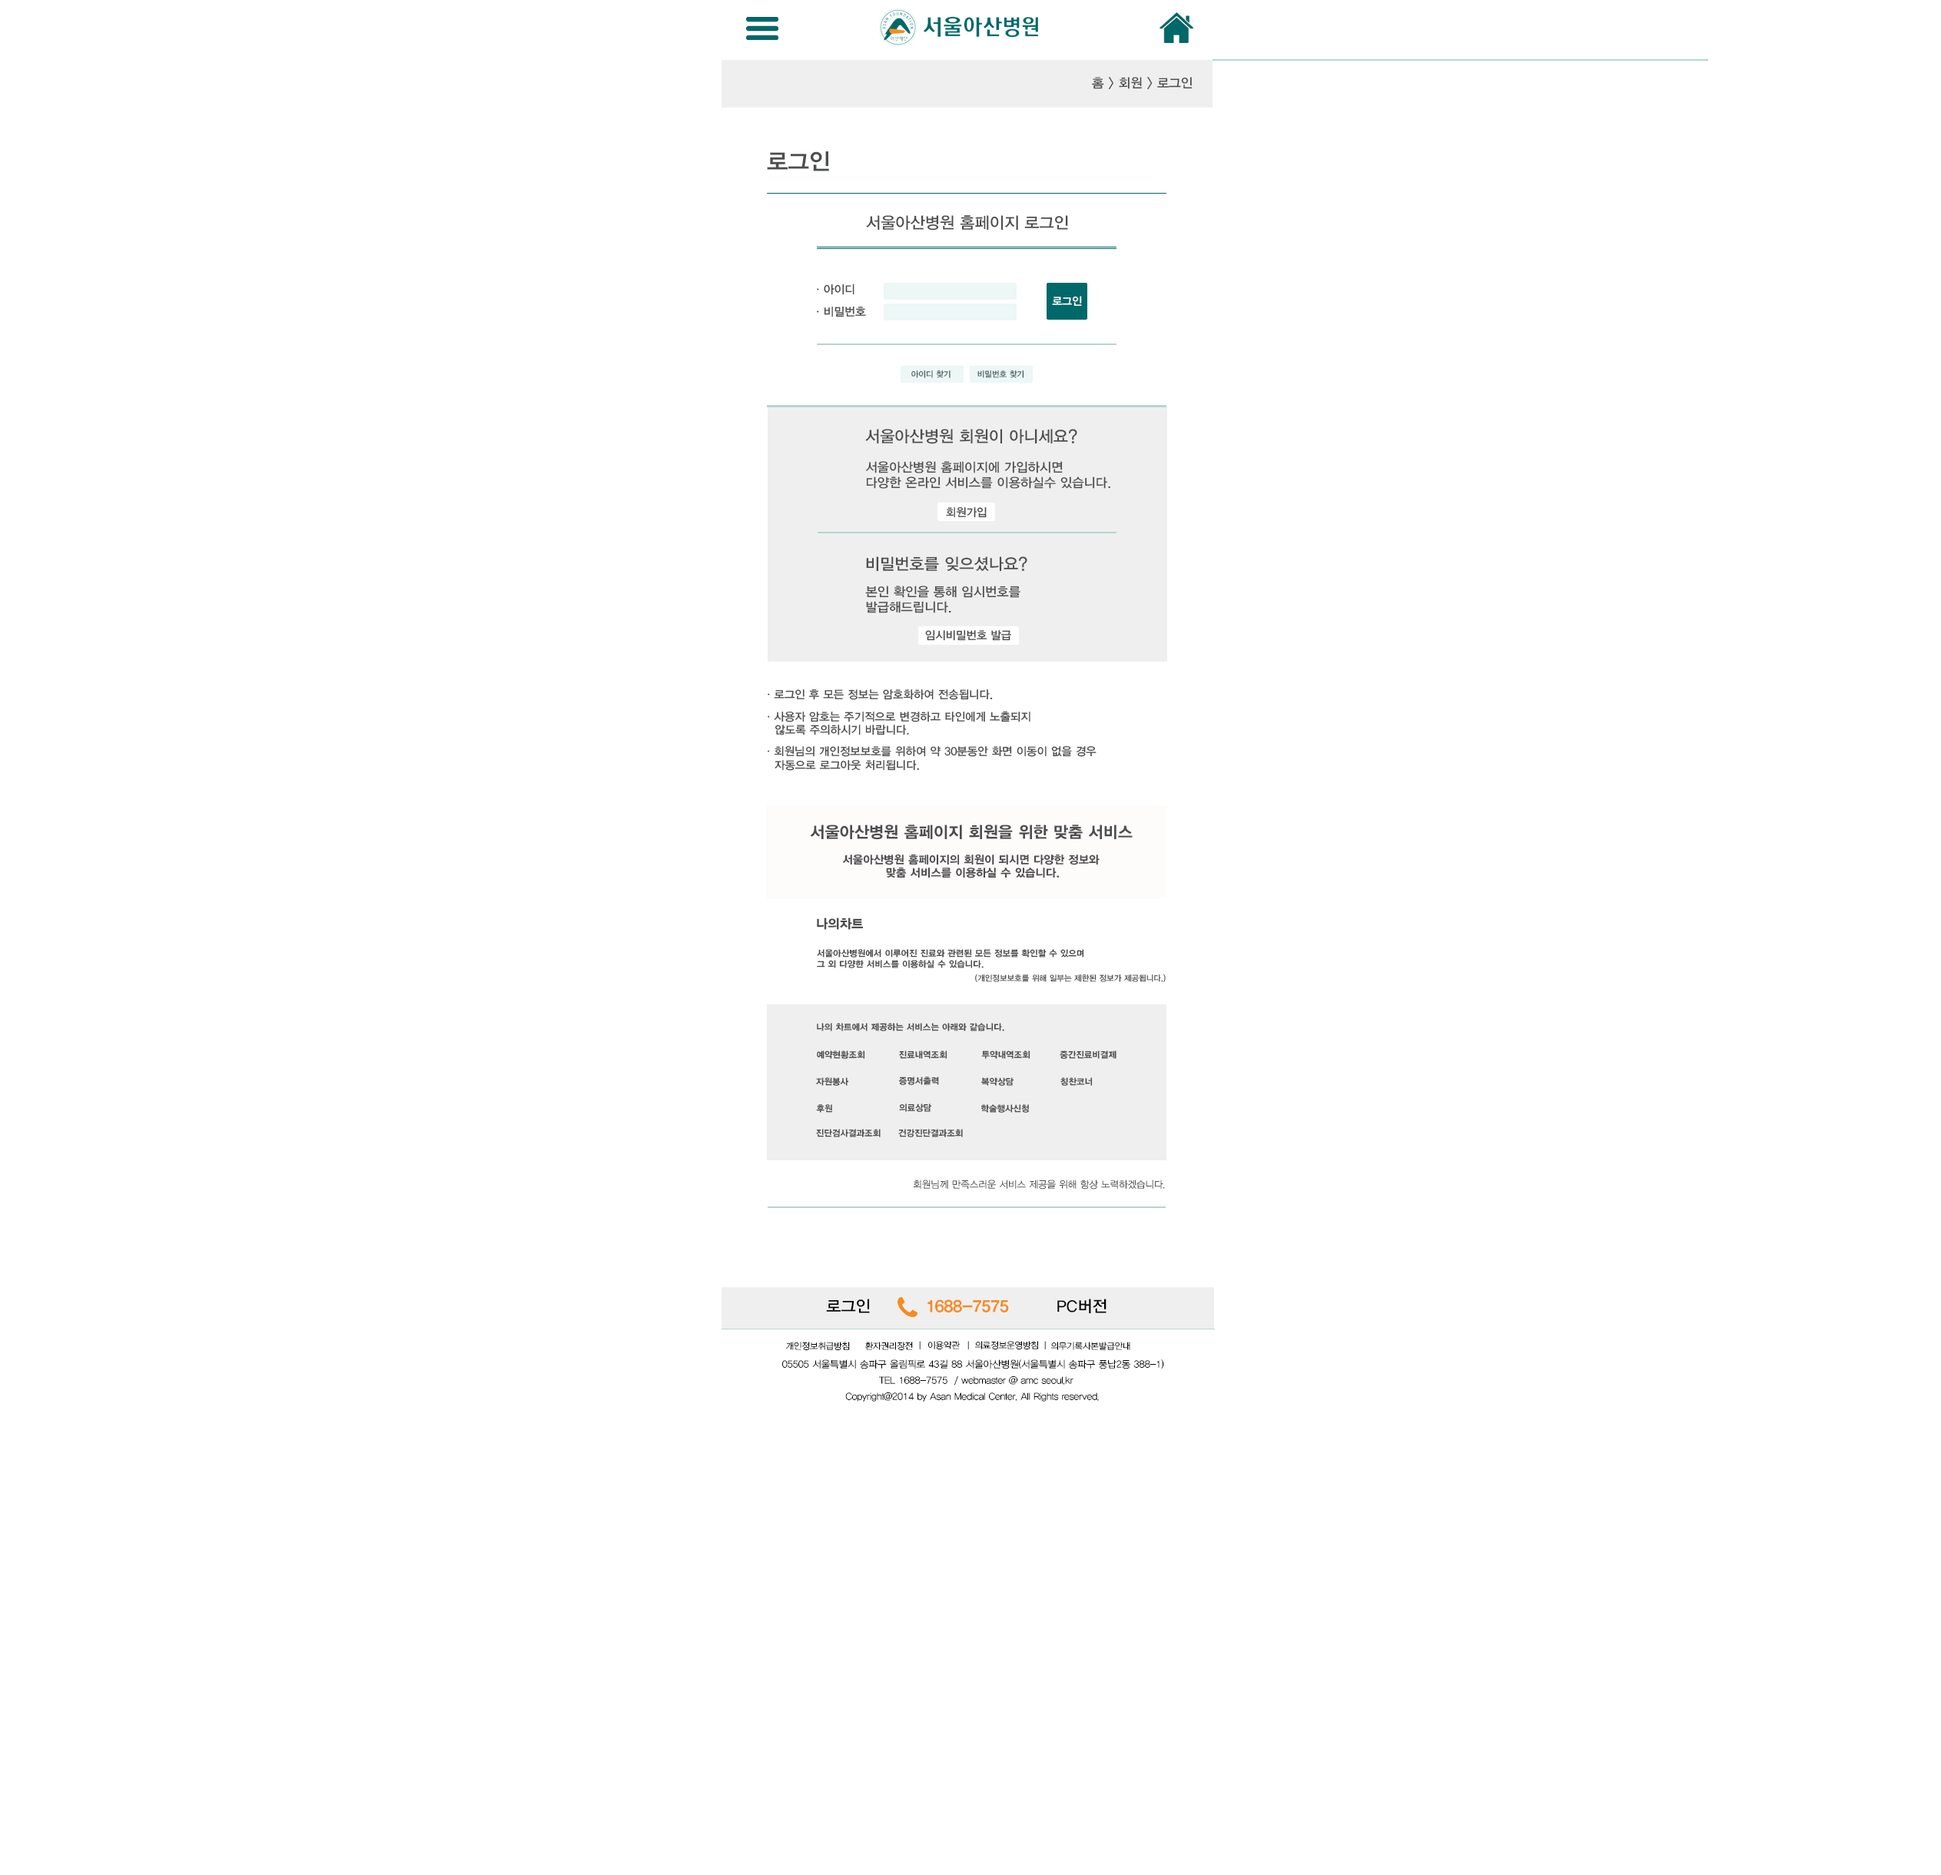
<style>
.page{position:relative;width:1941px;height:1875px;background:#ffffff}
.page>*{position:absolute;margin:0}
.t1{font:12.9px "YDIYGO330";color:#4c4d4f}
.t2{font:22.9px "YDIYGO340";color:#4c4d4f}
.t3{font:16px "YDIYGO330";color:#4c4d4f}
.t4{font:11.5px "YDIYGO330";color:#4c4d4f}
.t5{font:10.7px "YDIYGO330";color:#ffffff}
.t6{font:8px "YDIYGO330";color:#556363}
.t7{font:12.8px "YDIYGO330";color:#4c4d4f}
.t8{font:11.2px "YDIYGO330";color:#4c4d4f}
.t9{font:16px "YDIYGO350";color:#4c4d4f}
.t10{font:11.2px "YDIYGO350";color:#4c4d4f}
.t11{font:12.8px "YDIYGO360";color:#4c4d4f}
.t12{font:8.8px "YDIYGO350";color:#4c4d4f}
.t13{font:8px "YDIYGO330";color:#4c4d4f}
.t14{font:9.6px "YDIYGO310";color:#4c4d4f}
.t15{font:16px "YDIYGO330";color:#000000}
.t16{font:16px "YDIYGO350";color:#f68b1f}
.t17{font:8.7px "YDIYGO310";color:#000000}
.t18{font:8.7px "YDIYGO310"}
.t19{font:9.6px/16px "YDIYGO310";color:#000000}
.t20{font:9.6px "YDIYGO310";color:#000000}
</style>
<div class="page">
<p class="t1" style="left:1092px;top:77px;width:100px;height:13px">홈 &gt; 회원 &gt; 로그인</p>
<p class="t2" style="left:767px;top:151px;width:62px;height:20px">로그인</p>
<p class="t3" style="left:866px;top:215px;width:202px;height:15px">서울아산병원 홈페이지 로그인</p>
<p class="t4" style="left:817px;top:284px;width:37px;height:11px">ㆍ아이디</p>
<p class="t4" style="left:817px;top:306px;width:49px;height:11px">ㆍ비밀번호</p>
<p class="t5" style="left:1052px;top:296px;width:30px;height:10px">로그인</p>
<p class="t6" style="left:911px;top:370px;width:39px;height:8px">아이디 찾기</p>
<p class="t6" style="left:977px;top:370px;width:47px;height:8px">비밀번호 찾기</p>
<p class="t3" style="left:865px;top:429px;width:212px;height:15px">서울아산병원 회원이 아니세요?</p>
<p class="t7" style="left:865px;top:461px;width:245px;height:28px">서울아산병원 홈페이지에 가입하시면<br>다양한 온라인 서비스를 이용하실수 있습니다.</p>
<p class="t8" style="left:946px;top:506px;width:40px;height:12px">회원가입</p>
<p class="t3" style="left:866px;top:556px;width:161px;height:16px">비밀번호를 잊으셨나요?</p>
<p class="t7" style="left:865px;top:585px;width:155px;height:28px">본인 확인을 통해 임시번호를<br>발급해드립니다.</p>
<p class="t8" style="left:925px;top:630px;width:86px;height:11px">임시비밀번호 발급</p>
<p class="t8" style="left:768px;top:689px;width:225px;height:11px">ㆍ로그인 후 모든 정보는 암호화하여 전송됩니다.</p>
<p class="t8" style="left:768px;top:711px;width:262px;height:24px">ㆍ사용자 암호는 주기적으로 변경하고 타인에게 노출되지<br>   않도록 주의하시기 바랍니다.</p>
<p class="t8" style="left:767px;top:745px;width:329px;height:26px">ㆍ회원님의 개인정보보호를 위하여 약 30분동안 화면 이동이 없을 경우 <br>   자동으로 로그아웃 처리됩니다.</p>
<p class="t9" style="left:810px;top:824px;width:322px;height:16px">서울아산병원 홈페이지 회원을 위한 맞춤 서비스</p>
<p class="t10" style="left:842px;top:854px;width:257px;height:24px;text-align:center">서울아산병원 홈페이지의 회원이 되시면 다양한 정보와 <br>맞춤 서비스를 이용하실 수 있습니다.</p>
<p class="t11" style="left:817px;top:917px;width:46px;height:13px">나의차트</p>
<p class="t12" style="left:817px;top:949px;width:267px;height:19px">서울아산병원에서 이루어진 진료와 관련된 모든 정보를 확인할 수 있으며 <br>그 외 다양한 서비스를 이용하실 수 있습니다.</p>
<p class="t13" style="left:975px;top:973px;width:191px;height:10px">(개인정보보호를 위해 일부는 제한된 정보가 제공됩니다.)</p>
<p class="t12" style="left:817px;top:1023px;width:187px;height:8px">나의 차트에서 제공하는 서비스는 아래와 같습니다.</p>
<p class="t12" style="left:817px;top:1050px;width:48px;height:9px">예약현황조회</p>
<p class="t12" style="left:899px;top:1050px;width:48px;height:9px">진료내역조회</p>
<p class="t12" style="left:981px;top:1050px;width:49px;height:9px">투약내역조회</p>
<p class="t12" style="left:1059px;top:1050px;width:57px;height:9px">중간진료비결제</p>
<p class="t12" style="left:816px;top:1077px;width:33px;height:9px">자원봉사</p>
<p class="t12" style="left:898px;top:1076px;width:41px;height:9px">증명서출력</p>
<p class="t12" style="left:981px;top:1077px;width:33px;height:9px">복약상담</p>
<p class="t12" style="left:1060px;top:1077px;width:33px;height:9px">칭찬코너</p>
<p class="t12" style="left:816px;top:1104px;width:17px;height:8px">후원</p>
<p class="t12" style="left:899px;top:1103px;width:33px;height:9px">의료상담</p>
<p class="t12" style="left:980px;top:1104px;width:49px;height:8px">학술행사신청</p>
<p class="t12" style="left:816px;top:1129px;width:64px;height:8px">진단검사결과조회</p>
<p class="t12" style="left:898px;top:1129px;width:65px;height:8px">건강진단결과조회</p>
<p class="t14" style="left:913px;top:1179px;width:252px;height:10px">회원님께 만족스러운 서비스 제공을 위해 항상 노력하겠습니다.</p>
<p class="t15" style="left:826px;top:1298px;width:44px;height:15px">로그인</p>
<p class="t16" style="left:927px;top:1299px;width:82px;height:13px">1688-7575</p>
<p class="t15" style="left:1057px;top:1298px;width:49px;height:16px">PC버전</p>
<p class="t17" style="left:786px;top:1341px;width:64px;height:9px">개인정보취급방침</p>
<p class="t17" style="left:864px;top:1341px;width:49px;height:9px">환자권리장전</p>
<p class="t18" style="left:919px;top:1341px;width:1px;height:8px">|</p>
<p class="t17" style="left:928px;top:1341px;width:32px;height:8px">이용약관</p>
<p class="t18" style="left:967px;top:1341px;width:2px;height:8px">|</p>
<p class="t17" style="left:975px;top:1341px;width:63px;height:8px">의료정보운영방침</p>
<p class="t18" style="left:1044px;top:1341px;width:2px;height:8px">|</p>
<p class="t17" style="left:1050px;top:1341px;width:80px;height:9px">의무기록사본발급안내</p>
<p class="t19" style="left:782px;top:1359px;width:382px;height:26px;text-align:center">05505 서울특별시 송파구 올림픽로 43길 88 서울아산병원(서울특별시 송파구 풍납2동 388-1)  <br>TEL 1688-7575  / webmaster @ amc seoul.kr</p>
<p class="t20" style="left:845px;top:1392px;width:254px;height:9px">Copyright@2014 by Asan Medical Center. All Rights reserved.</p>
</div>
